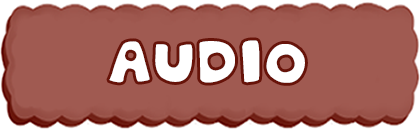
<style>
.page{position:relative;width:420px;height:130px;background:#a05a51}
.page>*{position:absolute;margin:0}
.t1{font:28px "PatchworkStitchlingsColor";letter-spacing:-0.025em;color:#ffffff}
</style>
<div class="page">
<p class="t1" style="left:109px;top:40px;width:196px;height:43px">Audio</p>
</div>
